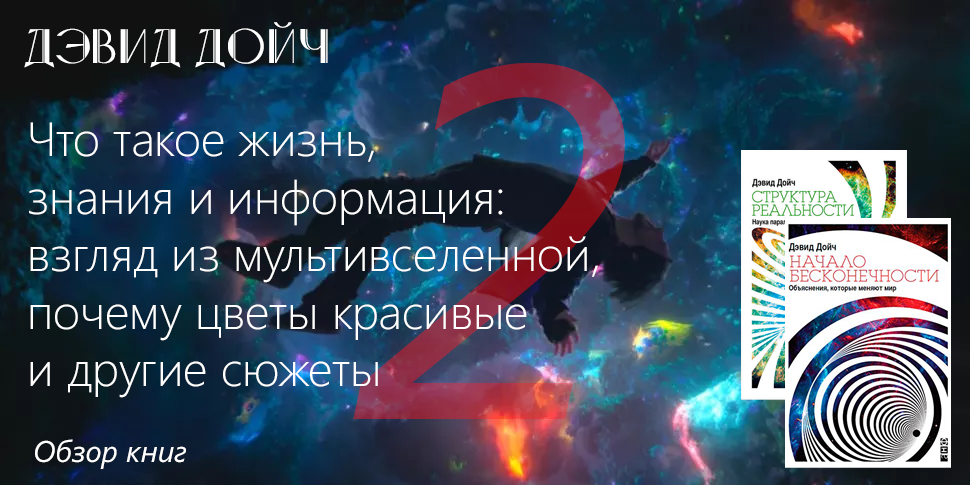
<style>
.page{position:relative;width:970px;height:485px}
.page>*{position:absolute;margin:0}
.t1{font:50px "5thAvenue";color:#ffffff}
.t2{font:500px "SegoeUI-Italic"}
.t3{font:48px "SegoeUI-Light";color:#ffffff}
.t4{font:30px "SegoeUI-Italic";color:#ffffff}
</style>
<div class="page">
<p class="t1" style="left:24px;top:22px;width:304px;height:46px">Дэвид Дойч</p>
<p class="t2" style="left:353px;top:63px;width:272px;height:356px">2</p>
<p class="t3" style="left:29px;top:122px;width:569px;height:276px;text-align:right">Что такое жизнь,<br>знания и информация:<br>взгляд из мультивселенной,<br>почему цветы красивые<br>и другие сюжеты</p>
<p class="t4" style="left:35px;top:439px;width:151px;height:30px">Обзор книг</p>
</div>
